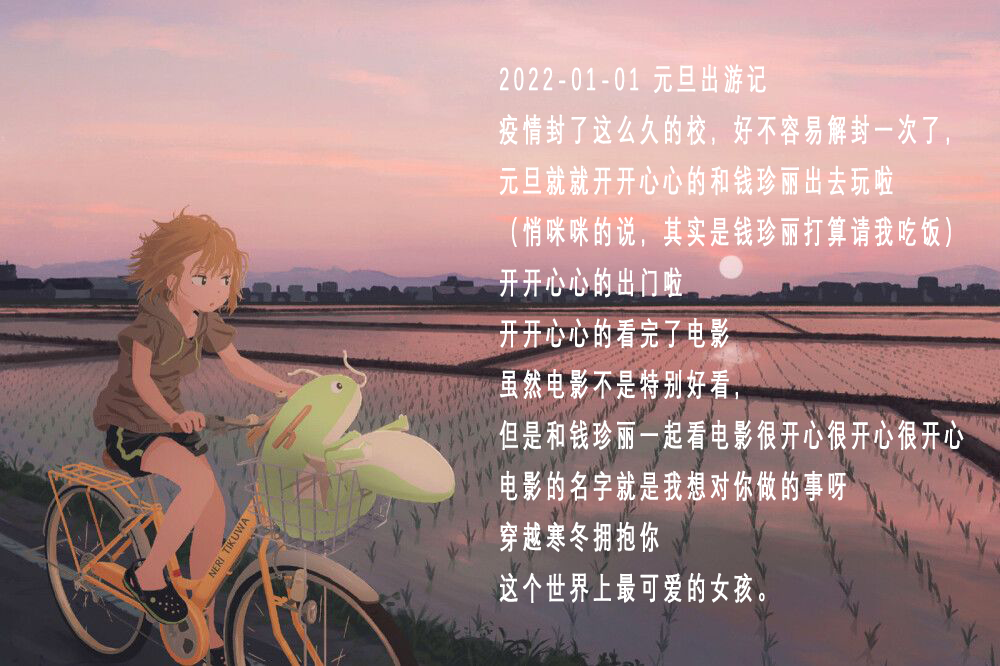
<style>
.page{position:relative;width:1000px;height:666px}
.page>*{position:absolute;margin:0}
.t1{font:31.3px/50.9px "DengXian";letter-spacing:0.22em;color:#ffffff;font-weight:bold;scale:0.6 1}
</style>
<div class="page">
<p class="t1" style="left:499px;top:64px;width:465px;height:539px">2022-01-01 元旦出游记<br>疫情封了这么久的校，好不容易解封一次了，<br>元旦就就开开心心的和钱珍丽出去玩啦<br>（悄咪咪的说，其实是钱珍丽打算请我吃饭）<br>开开心心的出门啦<br>开开心心的看完了电影<br>虽然电影不是特别好看，<br>但是和钱珍丽一起看电影很开心很开心很开心<br>电影的名字就是我想对你做的事呀<br>穿越寒冬拥抱你<br>这个世界上最可爱的女孩。</p>
</div>
